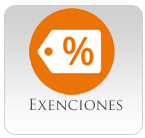
<style>
.page{position:relative;width:145px;height:138px}
.page>*{position:absolute;margin:0}
.t1{font:15px "TrajanPro-Regular";color:#4c4c4c}
</style>
<div class="page">
<p class="t1" style="left:29px;top:98px;width:94px;height:13px">Exenciones</p>
</div>
